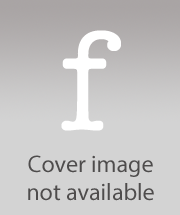
<style>
.page{position:relative;width:180px;height:215px;background:#d3d3d3}
.page>*{position:absolute;margin:0}
.t1{font:24px "MyriadPro-Regular";color:#4e4c4c}
</style>
<div class="page">
<p class="t1" style="left:28px;top:155px;width:126px;height:46px;text-align:center">Cover image not available</p>
</div>
